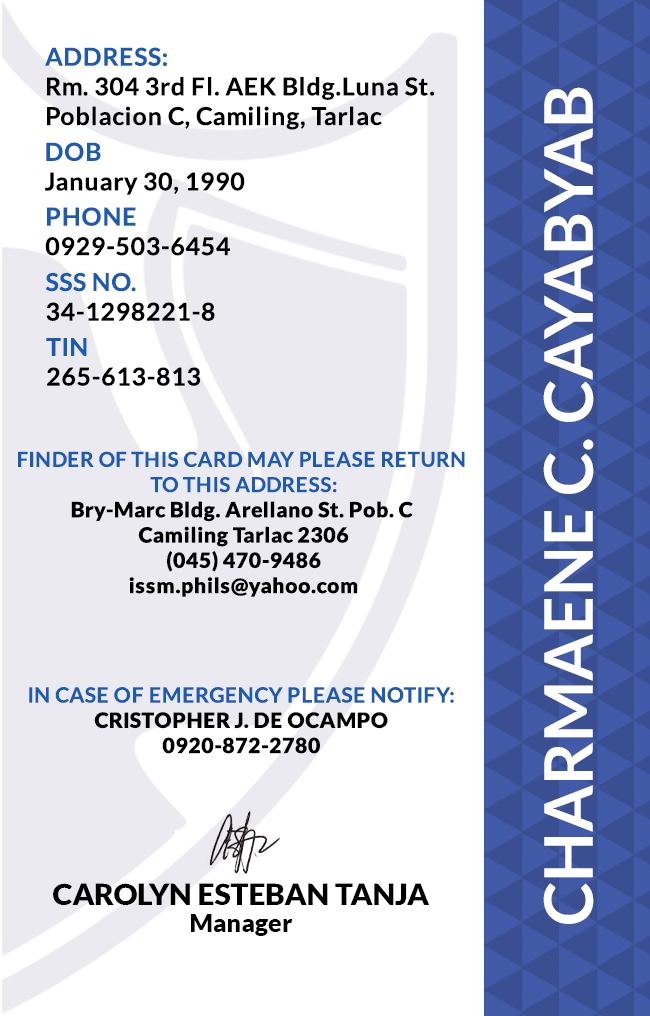
<style>
.page{position:relative;width:650px;height:1016px;background:#ffffff}
.page>*{position:absolute;margin:0}
.t1{font:24.7px/29.6px "Lato-Bold";letter-spacing:0.025em;color:#000000}
.t2{font:24.7px/29.6px "Lato-Bold";letter-spacing:0.025em;color:#1c5bb0}
.t3{font:66.7px "Lato-Bold";color:#ffffff}
.t4{font:21.1px "Lato-Black";letter-spacing:0.025em}
.t5{font:20.5px/25.3px "Lato-Bold";letter-spacing:0.025em;text-transform:uppercase}
.t6{font:21.1px "Lato-Black";letter-spacing:0.025em;color:#000000}
.t7{font:21.1px/25.3px "Lato-Bold";letter-spacing:0.025em;color:#1c5bb0}
.t8{font:29.5px "Lato-Black";color:#000000}
.t9{font:25px "Lato-Black";color:#000000}
</style>
<div class="page">
<p class="t1" style="left:45px;top:47px;width:389px;height:83px"><span class="t2">ADDRESS:<br></span>Rm. 304 3rd Fl. AEK Bldg.Luna St. <br>Poblacion C, Camiling, Tarlac</p>
<p class="t3" style="left:543px;top:87px;width:51px;height:837px;rotate:-90deg">CHARMAENE C. CAYABYAB</p>
<p class="t1" style="left:45px;top:142px;width:200px;height:53px"><span class="t2">DOB<br></span>January 30, 1990</p>
<p class="t1" style="left:45px;top:207px;width:185px;height:49px"><span class="t2">PHONE <br></span>0929-503-6454</p>
<p class="t1" style="left:45px;top:272px;width:170px;height:49px"><span class="t2">SSS NO.<br></span>34-1298221-8</p>
<p class="t1" style="left:46px;top:338px;width:155px;height:48px"><span class="t2">TIN<br></span>265-613-813</p>
<p class="t4" style="left:18px;top:451px;width:447px;height:146px;text-align:center"><span class="t5">Finder of this card may please return <br>to this address:<br></span>Bry-Marc Bldg. Arellano St. Pob. C <br>Camiling Tarlac 2306<br>(045) 470-9486<br>issm.phils@yahoo.com</p>
<p class="t6" style="left:29px;top:687px;width:425px;height:67px;text-align:center"><span class="t7">IN CASE OF EMERGENCY PLEASE NOTIFY:<br></span>CRISTOPHER J. DE OCAMPO<br>0920-872-2780</p>
<p class="t8" style="left:53px;top:883px;width:376px;height:22px">CAROLYN ESTEBAN TANJA</p>
<p class="t9" style="left:191px;top:914px;width:102px;height:22px">Manager</p>
</div>
